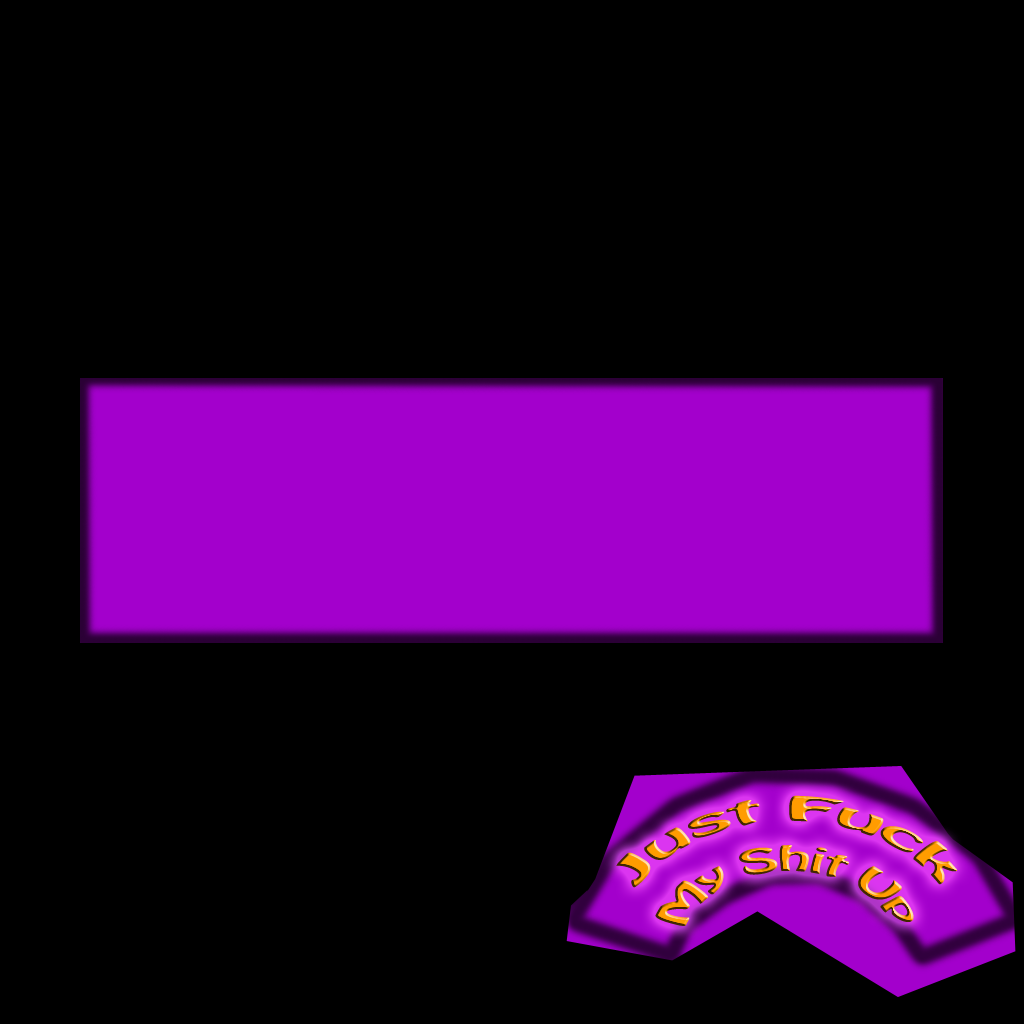
<style>
.page{position:relative;width:1024px;height:1024px;background:#000000}
.page>*{position:absolute;margin:0}
.t1{font:30.1px/50.1px "HoboStd";letter-spacing:-0.025em;scale:1.31 1}
</style>
<div class="page">
<p class="t1" style="left:616px;top:795px;width:342px;height:131px;text-align:center;rotate:-1deg">Just Fuck<br>My Shit Up</p>
</div>
